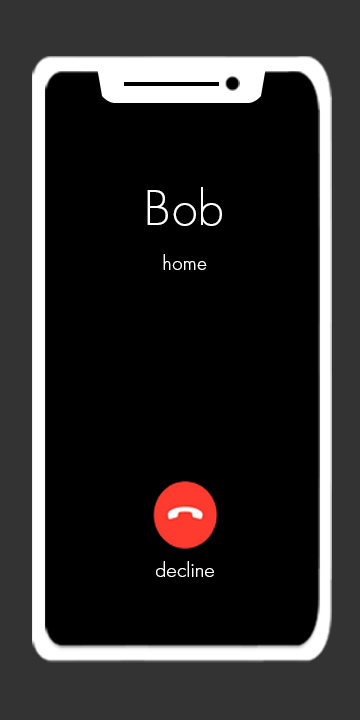
<style>
.page{position:relative;width:360px;height:720px;background:#000000}
.page>*{position:absolute;margin:0}
.t1{font:52.5px "FuturaPT-Light";letter-spacing:-0.01em;color:#ffffff}
.t2{font:21.2px "FuturaPT-Light";letter-spacing:0.01em;color:#ffffff}
</style>
<div class="page">
<p class="t1" style="left:147px;top:187px;width:75px;height:39px">Bob</p>
<p class="t2" style="left:163px;top:254px;width:44px;height:16px">home</p>
<p class="t2" style="left:156px;top:561px;width:58px;height:16px">decline</p>
</div>
